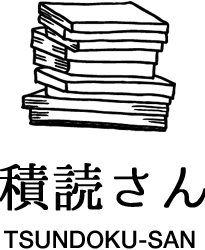
<style>
.page{position:relative;width:205px;height:250px;background:#ffffff}
.page>*{position:absolute;margin:0}
.t1{font:52px "02UtsukushiMincho";color:#000000;font-weight:bold}
.t2{font:24px "HelveticaNeue-Medium";color:#000000}
</style>
<div class="page">
<p class="t1" style="left:0px;top:163px;width:207px;height:48px">積読さん</p>
<p class="t2" style="left:4px;top:230px;width:191px;height:19px">TSUNDOKU-SAN</p>
</div>
